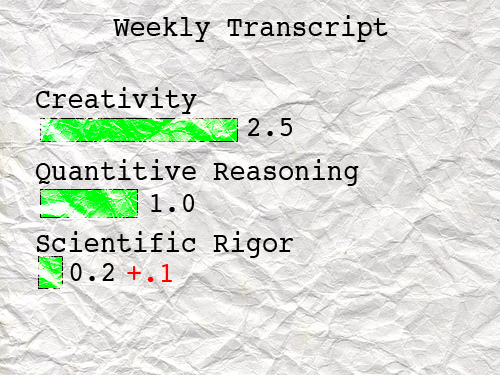
<style>
.page{position:relative;width:500px;height:375px}
.page>*{position:absolute;margin:0}
.t1{font:30px "Courier";color:#000000;scale:0.9 1}
.t2{font:30px "Courier";color:#ff0000;scale:0.9 1}
</style>
<div class="page">
<p class="t1" style="left:36px;top:15px;width:352px;height:243px;text-align:center">Weekly Transcript<br><br>Creativity<br><br>Quantitive Reasoning<br><br>Scientific Rigor</p>
<p class="t1" style="left:248px;top:118px;width:44px;height:18px">2.5</p>
<p class="t1" style="left:151px;top:194px;width:43px;height:18px">1.0</p>
<p class="t1" style="left:70px;top:263px;width:44px;height:18px">0.2</p>
<p class="t2" style="left:127px;top:264px;width:45px;height:18px">+.1</p>
</div>
